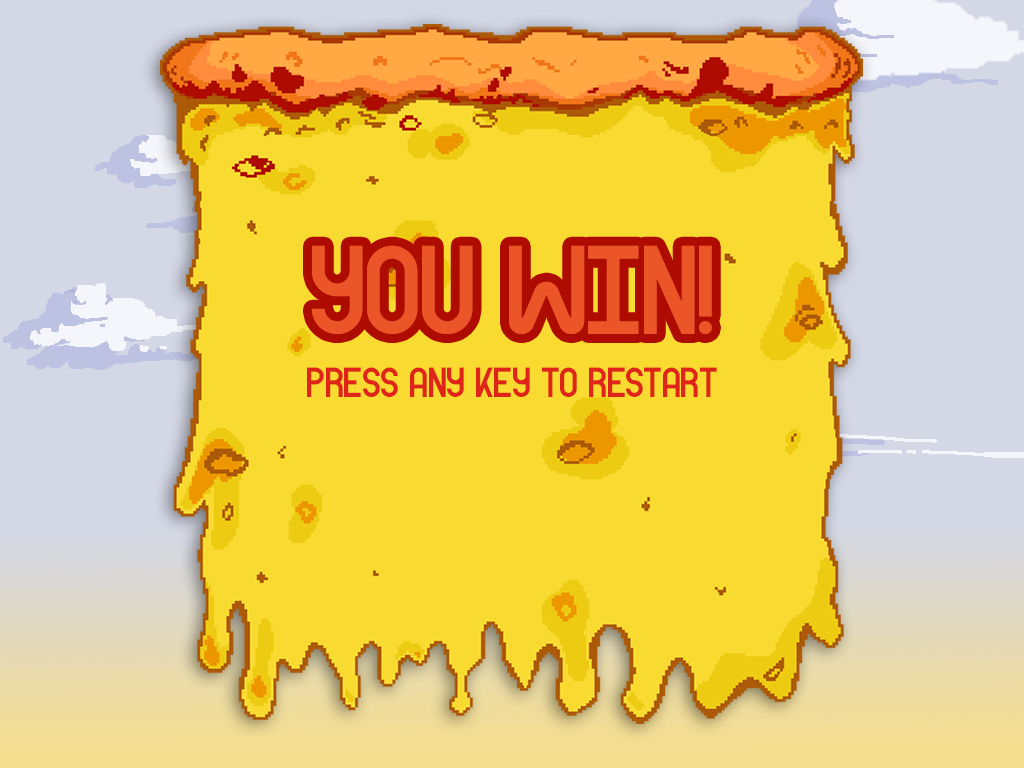
<style>
.page{position:relative;width:1024px;height:768px;background:#f9da31}
.page>*{position:absolute;margin:0}
.t1{font:125.7px "Woodhouse";color:#eb5527}
.t2{font:42px "Woodhouse";color:#df2519}
</style>
<div class="page">
<p class="t1" style="left:312px;top:245px;width:400px;height:89px">you win!</p>
<p class="t2" style="left:307px;top:367px;width:410px;height:30px">Press any key to restart</p>
</div>
